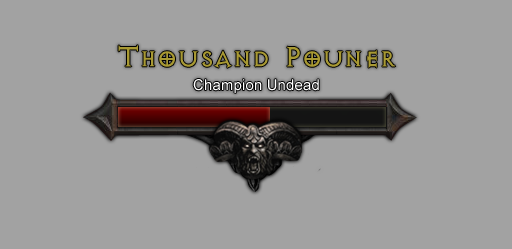
<style>
.page{position:relative;width:512px;height:249px;background:#a2a2a2}
.page>*{position:absolute;margin:0}
.t1{font:34.9px "AvQest";letter-spacing:0.01em;color:#a89933}
.t2{font:32px "AvQest";letter-spacing:0.01em;color:#a89933}
.t3{font:15px "ArialMT";letter-spacing:0.01em;color:#ffffff}
</style>
<div class="page">
<p class="t1" style="left:118px;top:45px;width:278px;height:23px"><span class="t2">T</span>housand<span class="t2"> P</span>ouner</p>
<p class="t3" style="left:193px;top:79px;width:126px;height:14px">Champion Undead</p>
</div>
